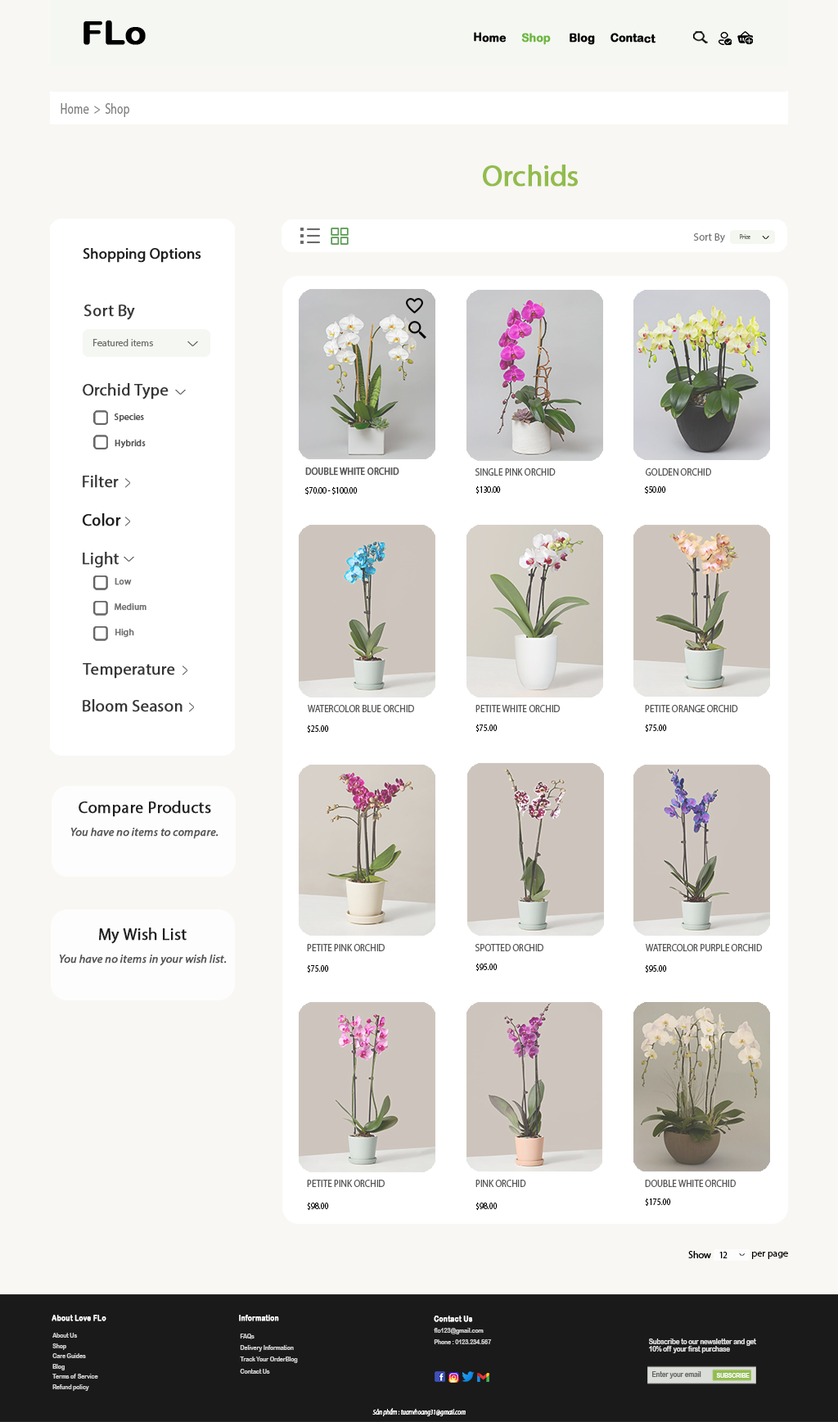
<style>
.page{position:relative;width:838px;height:1422px;background:#f8f7f3}
.page>*{position:absolute;margin:0}
.t1{font:32.7px "ArialRoundedMTBold";color:#020202;font-weight:bold;scale:1.08 1}
.t2{font:11.7px "ArialRoundedMTBold";color:#020202;font-weight:bold;scale:0.95 1}
.t3{font:11.7px "ArialRoundedMTBold";color:#090909;font-weight:bold;scale:0.95 1}
.t4{font:11.7px "ArialRoundedMTBold";color:#6fb644;font-weight:bold;scale:0.95 1}
.t5{font:14.7px "MyriadPro-Regular";color:#818181;scale:0.77 1}
.t6{font:29.5px "MyriadPro-Regular";color:#92bc4d;font-weight:bold}
.t7{font:10.6px "MyriadPro-Regular";color:#747474}
.t8{font:6.6px "AgencyFB-Reg";color:#6f716e}
.t9{font:14.7px "MyriadPro-Regular";color:#1f1f1f;font-weight:bold}
.t10{font:16.4px "MyriadPro-Regular";color:#353535;font-weight:bold}
.t11{font:9.8px "MyriadPro-Regular";color:#6f706d}
.t12{font:9px "MyriadPro-Regular";color:#585858;font-weight:bold}
.t13{font:10.1px "MyriadPro-Regular";color:#595959;font-weight:bold;scale:0.88 1}
.t14{font:10.1px "MyriadPro-Regular";color:#595959;text-transform:uppercase;scale:0.9 1}
.t15{font:9.3px "MyriadPro-Regular";color:#020202;scale:0.82 1}
.t16{font:16.4px "MyriadPro-Regular";color:#1a1a1a;font-weight:bold}
.t17{font:9px "MyriadPro-Regular";color:#747474;font-weight:bold}
.t18{font:16.4px "MyriadPro-Regular";color:#201f1f;font-weight:bold}
.t19{font:11.5px "MyriadPro-It";color:#585858;font-weight:bold}
.t20{font:9px "MyriadPro-Regular";color:#000000}
.t21{font:9.8px "MyriadPro-Regular";color:#000000}
.t22{font:8.2px "ArialRoundedMTBold";color:#ffffff;font-weight:bold;scale:0.84 1}
.t23{font:6.5px/10.2px "ArialRoundedMTBold";color:#cecece;scale:0.84 1}
.t24{font:6.5px/11.7px "ArialRoundedMTBold";color:#cecece;scale:0.84 1}
.t25{font:7.4px "ArialRoundedMTBold";color:#e2e2e2;scale:0.84 1}
.t26{font:7.4px "ArialRoundedMTBold";color:#686967;scale:0.84 1}
.t27{font:6.5px "ArialRoundedMTBold";color:#ffffff;scale:0.84 1}
.t28{font:7.3px "MyriadPro-It";color:#ffffff;scale:0.81 1}
</style>
<div class="page">
<p class="t1" style="left:84px;top:20px;width:62px;height:25px">FLo</p>
<p class="t2" style="left:474px;top:32px;width:182px;height:13px"><span class="t3">Home     </span><span class="t4">Shop</span>      Blog     Contact</p>
<p class="t5" style="left:61px;top:103px;width:68px;height:14px">Home  &gt;  Shop</p>
<p class="t6" style="left:483px;top:165px;width:95px;height:22px">Orchids</p>
<p class="t7" style="left:694px;top:233px;width:31px;height:10px">Sort By</p>
<p class="t8" style="left:740px;top:234px;width:11px;height:5px">Price</p>
<p class="t9" style="left:83px;top:248px;width:118px;height:15px">Shopping Options</p>
<p class="t10" style="left:84px;top:305px;width:51px;height:15px">Sort By</p>
<p class="t11" style="left:93px;top:339px;width:60px;height:7px">Featured items</p>
<p class="t10" style="left:83px;top:383px;width:86px;height:17px">Orchid Type</p>
<p class="t12" style="left:114px;top:413px;width:30px;height:9px">Species</p>
<p class="t12" style="left:115px;top:440px;width:31px;height:9px">Hybrids</p>
<p class="t13" style="left:305px;top:468px;width:95px;height:8px">DOUBLE WHITE ORCHID</p>
<p class="t14" style="left:475px;top:468px;width:81px;height:8px">single pink orchid</p>
<p class="t14" style="left:646px;top:468px;width:66px;height:8px">golden orchid</p>
<p class="t10" style="left:83px;top:475px;width:36px;height:13px">Filter</p>
<p class="t15" style="left:476px;top:486px;width:25px;height:9px">$130.00</p>
<p class="t15" style="left:645px;top:486px;width:21px;height:9px">$50.00</p>
<p class="t15" style="left:305px;top:486px;width:53px;height:9px">$70.00 - $100.00</p>
<p class="t16" style="left:83px;top:513px;width:38px;height:13px">Color</p>
<p class="t10" style="left:83px;top:552px;width:36px;height:16px">Light</p>
<p class="t17" style="left:115px;top:578px;width:17px;height:7px">Low</p>
<p class="t17" style="left:115px;top:603px;width:32px;height:8px">Medium</p>
<p class="t17" style="left:115px;top:629px;width:19px;height:9px">High</p>
<p class="t10" style="left:83px;top:663px;width:92px;height:16px">Temperature</p>
<p class="t10" style="left:83px;top:699px;width:100px;height:13px">Bloom Season</p>
<p class="t14" style="left:308px;top:705px;width:106px;height:7px">Watercolor Blue Orchid</p>
<p class="t14" style="left:476px;top:705px;width:84px;height:7px">Petite White Orchid</p>
<p class="t14" style="left:645px;top:705px;width:94px;height:7px">Petite Orange Orchid</p>
<p class="t18" style="left:79px;top:801px;width:132px;height:16px">Compare Products</p>
<p class="t19" style="left:70px;top:828px;width:149px;height:11px">You have no items to compare.</p>
<p class="t18" style="left:99px;top:928px;width:88px;height:16px">My Wish List</p>
<p class="t14" style="left:307px;top:944px;width:78px;height:7px">Petite Pink Orchid</p>
<p class="t14" style="left:475px;top:944px;width:69px;height:7px">Spotted Orchid</p>
<p class="t14" style="left:646px;top:944px;width:116px;height:7px">Watercolor Purple Orchid</p>
<p class="t19" style="left:59px;top:955px;width:168px;height:11px">You have no items in your wish list.</p>
<p class="t14" style="left:307px;top:1180px;width:78px;height:7px">Petite Pink Orchid</p>
<p class="t14" style="left:476px;top:1180px;width:50px;height:7px">Pink Orchid</p>
<p class="t14" style="left:645px;top:1180px;width:91px;height:7px">DOUBLE WHITE ORCHID</p>
<p class="t20" style="left:720px;top:1252px;width:8px;height:6px">12</p>
<p class="t21" style="left:752px;top:1252px;width:36px;height:7px">per page</p>
<p class="t22" style="left:52px;top:1315px;width:54px;height:7px">About Love FLo</p>
<p class="t22" style="left:239px;top:1315px;width:40px;height:7px">Information</p>
<p class="t22" style="left:434px;top:1316px;width:39px;height:6px">Contact Us</p>
<p class="t23" style="left:52px;top:1333px;width:46px;height:58px">About Us<br>Shop<br>Care Guides<br>Blog<br>Terms of Service<br>Refund policy</p>
<p class="t24" style="left:240px;top:1334px;width:58px;height:40px">FAQs<br>Delivery Information<br>Track Your OrderBlog<br>Contact Us</p>
<p class="t24" style="left:434px;top:1328px;width:58px;height:16px">flo123@gmail.com<br>Phone : 0123.234.567</p>
<p class="t25" style="left:649px;top:1339px;width:108px;height:14px">Subscribe to our newsletter and get<br>10% off your first purchase</p>
<p class="t26" style="left:653px;top:1371px;width:49px;height:8px">Enter your email</p>
<p class="t27" style="left:716px;top:1373px;width:34px;height:5px">SUBSCRIBE</p>
<p class="t28" style="left:373px;top:1408px;width:93px;height:8px">Sản phẩm : tuanvhoang31@gmail.com</p>
</div>
